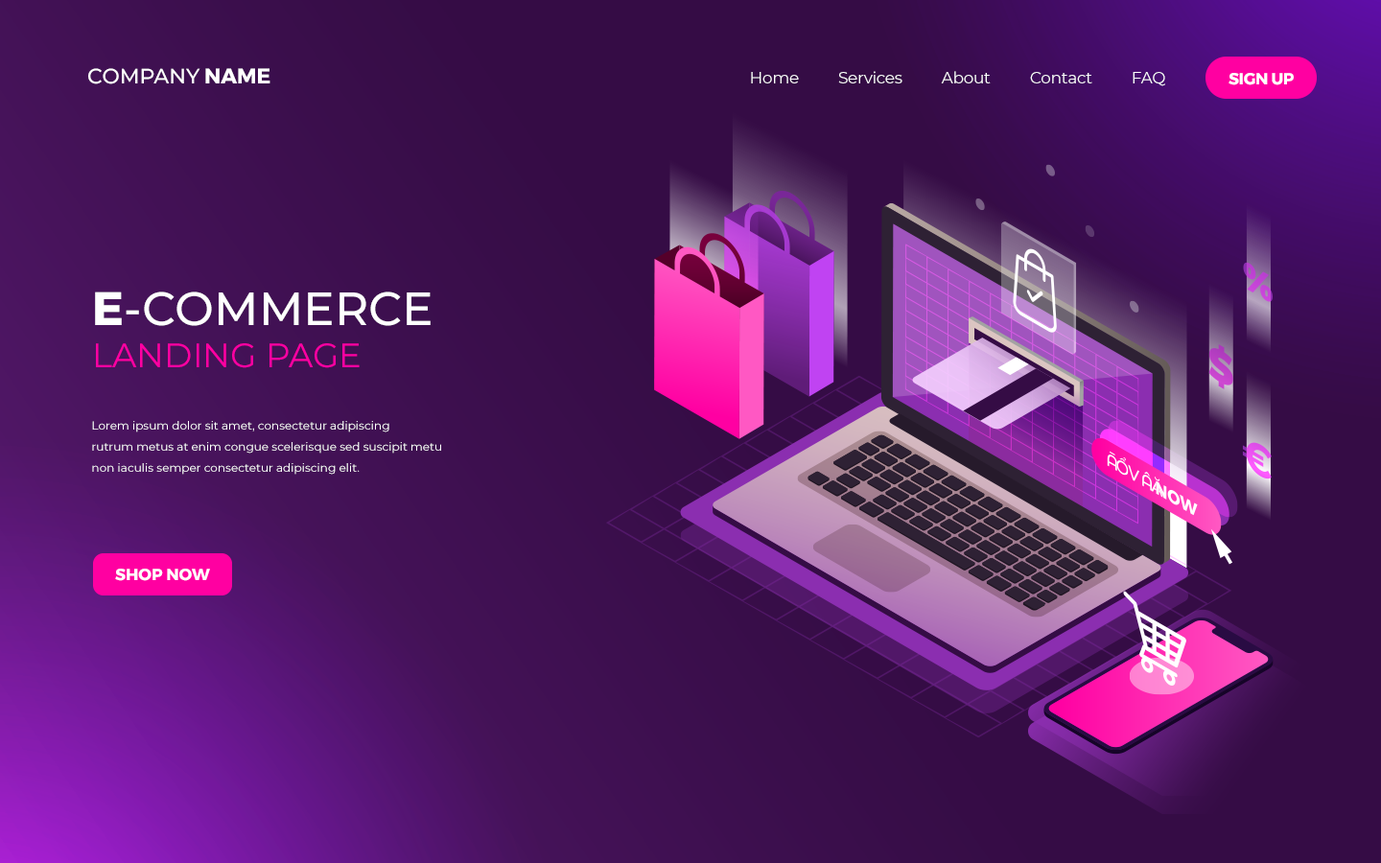
<style>
.page{position:relative;width:1381px;height:863px}
.page>*{position:absolute;margin:0}
.t1{font:20.9px "Montserrat-Medium";color:#ffffff}
.t2{font:20.9px "Montserrat-Bold";color:#ffffff}
.t3{font:16.3px "Montserrat-Regular";letter-spacing:-0.02em;color:#ffffff}
.t4{font:16.3px "Montserrat-Bold";letter-spacing:-0.02em;color:#ffffff}
.t5{font:46.7px "Montserrat-Medium";color:#ffffff;text-transform:uppercase}
.t6{font:46.7px "Montserrat-Bold";color:#ffffff}
.t7{font:46.7px "Montserrat-Medium";color:#ffffff}
.t8{font:34px "Montserrat-Regular";color:#ff00a2;text-transform:uppercase}
.t9{font:11.6px/21.2px "Montserrat-Regular";color:#ffffff}
.t10{font:16.3px "Montserrat-Bold";color:#ffffff;text-transform:uppercase}
</style>
<div class="page">
<p class="t1" style="left:88px;top:68px;width:182px;height:16px">COMPANY<span class="t2"> NAME</span></p>
<p class="t3" style="left:751px;top:71px;width:414px;height:15px">Home          Services          About          Contact          FAQ</p>
<p class="t4" style="left:1229px;top:73px;width:65px;height:12px">SIGN UP</p>
<p class="t5" style="left:95px;top:292px;width:336px;height:34px"><span class="t6">E</span><span class="t7">-</span>commerce</p>
<p class="t8" style="left:96px;top:343px;width:264px;height:25px">landing page</p>
<p class="t9" style="left:92px;top:421px;width:349px;height:54px">Lorem ipsum dolor sit amet, consectetur adipiscing <br>rutrum metus at enim congue scelerisque sed suscipit metu<br>non iaculis semper consectetur adipiscing elit.</p>
<p class="t10" style="left:115px;top:569px;width:95px;height:12px">shop now</p>
</div>
